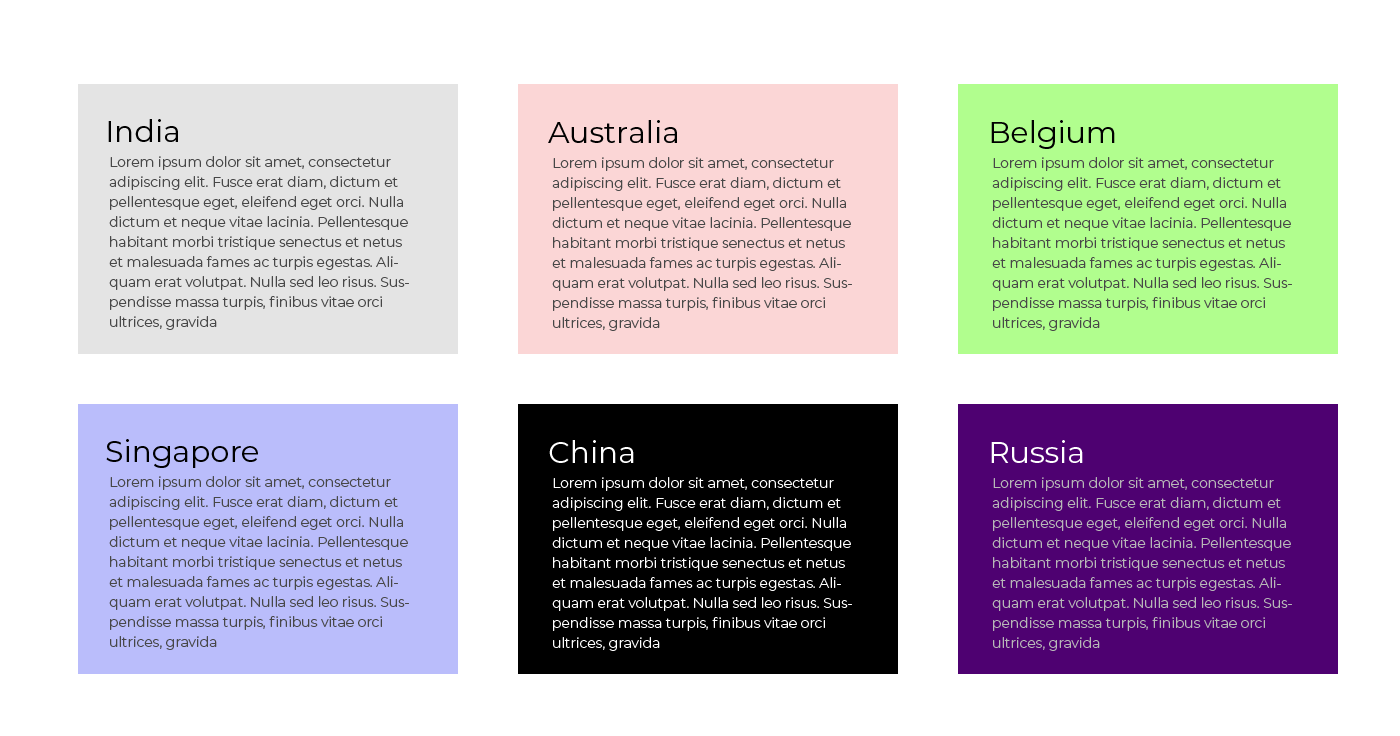
<style>
.page{position:relative;width:1400px;height:736px;background:#ffffff}
.page>*{position:absolute;margin:0}
.t1{font:30px "Montserrat-Regular";color:#000000}
.t2{font:14px/20px "Montserrat-Light";color:#474747}
.t3{font:30px "Montserrat-Regular";color:#ffffff}
.t4{font:14px/20px "Montserrat-Light";color:#ffffff}
.t5{font:14px/20px "Montserrat-Light";color:#b8b8b8}
</style>
<div class="page">
<p class="t1" style="left:108px;top:119px;width:70px;height:23px">India</p>
<p class="t1" style="left:548px;top:120px;width:129px;height:23px">Australia</p>
<p class="t1" style="left:991px;top:120px;width:124px;height:29px">Belgium</p>
<p class="t2" style="left:109px;top:156px;width:300px;height:174px">Lorem ipsum dolor sit amet, consectetur adipiscing elit. Fusce erat diam, dictum et pellentesque eget, eleifend eget orci. Nulla dictum et neque vitae lacinia. Pellentesque habitant morbi tristique senectus et netus et malesuada fames ac turpis egestas. Aliquam erat volutpat. Nulla sed leo risus. Suspendisse massa turpis, finibus vitae orci ultrices, gravida</p>
<p class="t2" style="left:552px;top:157px;width:300px;height:174px">Lorem ipsum dolor sit amet, consectetur adipiscing elit. Fusce erat diam, dictum et pellentesque eget, eleifend eget orci. Nulla dictum et neque vitae lacinia. Pellentesque habitant morbi tristique senectus et netus et malesuada fames ac turpis egestas. Aliquam erat volutpat. Nulla sed leo risus. Suspendisse massa turpis, finibus vitae orci ultrices, gravida</p>
<p class="t2" style="left:992px;top:157px;width:300px;height:174px">Lorem ipsum dolor sit amet, consectetur adipiscing elit. Fusce erat diam, dictum et pellentesque eget, eleifend eget orci. Nulla dictum et neque vitae lacinia. Pellentesque habitant morbi tristique senectus et netus et malesuada fames ac turpis egestas. Aliquam erat volutpat. Nulla sed leo risus. Suspendisse massa turpis, finibus vitae orci ultrices, gravida</p>
<p class="t1" style="left:106px;top:439px;width:152px;height:29px">Singapore</p>
<p class="t3" style="left:549px;top:440px;width:85px;height:23px">China</p>
<p class="t3" style="left:991px;top:440px;width:92px;height:23px">Russia</p>
<p class="t2" style="left:109px;top:476px;width:300px;height:174px">Lorem ipsum dolor sit amet, consectetur adipiscing elit. Fusce erat diam, dictum et pellentesque eget, eleifend eget orci. Nulla dictum et neque vitae lacinia. Pellentesque habitant morbi tristique senectus et netus et malesuada fames ac turpis egestas. Aliquam erat volutpat. Nulla sed leo risus. Suspendisse massa turpis, finibus vitae orci ultrices, gravida</p>
<p class="t4" style="left:552px;top:477px;width:300px;height:174px">Lorem ipsum dolor sit amet, consectetur adipiscing elit. Fusce erat diam, dictum et pellentesque eget, eleifend eget orci. Nulla dictum et neque vitae lacinia. Pellentesque habitant morbi tristique senectus et netus et malesuada fames ac turpis egestas. Aliquam erat volutpat. Nulla sed leo risus. Suspendisse massa turpis, finibus vitae orci ultrices, gravida</p>
<p class="t5" style="left:992px;top:477px;width:300px;height:174px">Lorem ipsum dolor sit amet, consectetur adipiscing elit. Fusce erat diam, dictum et pellentesque eget, eleifend eget orci. Nulla dictum et neque vitae lacinia. Pellentesque habitant morbi tristique senectus et netus et malesuada fames ac turpis egestas. Aliquam erat volutpat. Nulla sed leo risus. Suspendisse massa turpis, finibus vitae orci ultrices, gravida</p>
</div>
